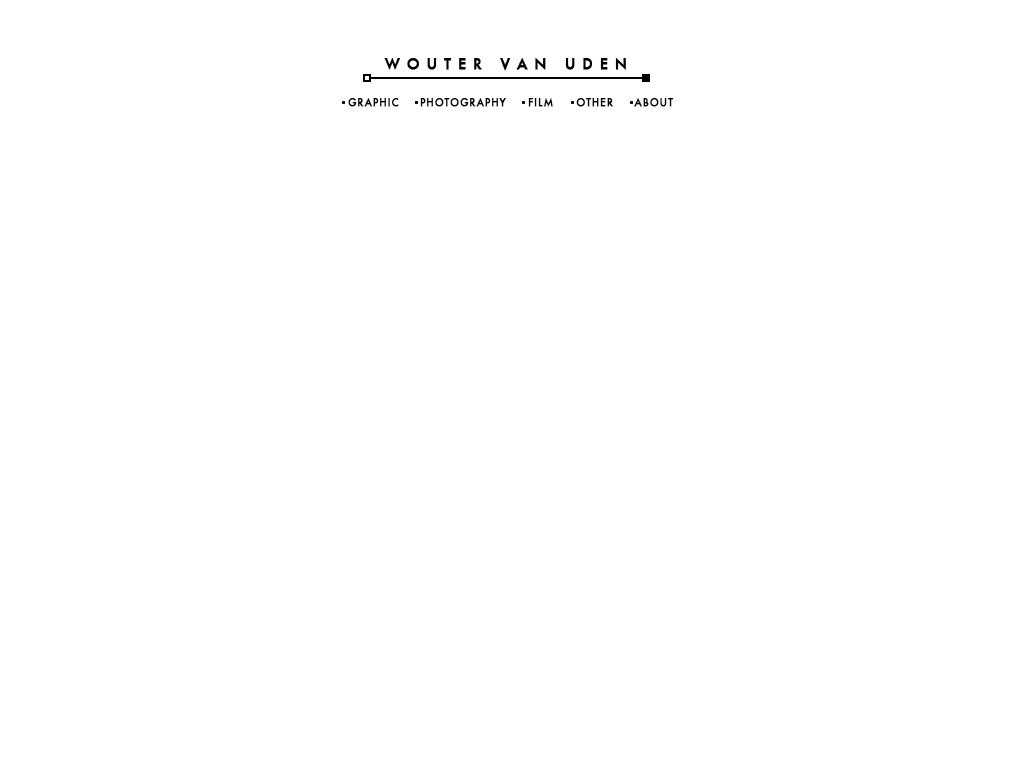
<style>
.page{position:relative;width:1024px;height:768px;background:#ffffff}
.page>*{position:absolute;margin:0}
.t1{font:10px "Futura-Medium";letter-spacing:0.075em;color:#000000;text-transform:uppercase;font-weight:bold}
</style>
<div class="page">
<p class="t1" style="left:348px;top:98px;width:326px;height:9px">graphic photography film    other     about</p>
</div>
